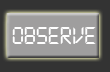
<style>
.page{position:relative;width:110px;height:72px;background:#9f9e9e}
.page>*{position:absolute;margin:0}
.t1{font:26px "DS-Digital";letter-spacing:-0.025em;color:#ffffff}
</style>
<div class="page">
<p class="t1" style="left:12px;top:27px;width:84px;height:18px">Observe</p>
</div>
